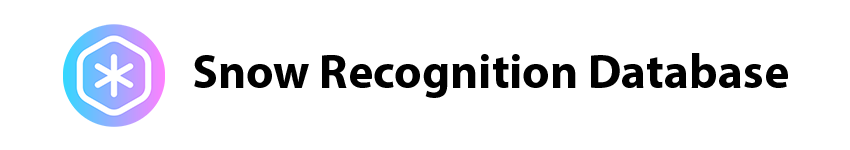
<style>
.page{position:relative;width:850px;height:150px;background:#ffffff}
.page>*{position:absolute;margin:0}
.t1{font:48px "MyriadPro-Bold";color:#000000}
</style>
<div class="page">
<p class="t1" style="left:194px;top:53px;width:594px;height:45px">Snow Recognition Database</p>
</div>
